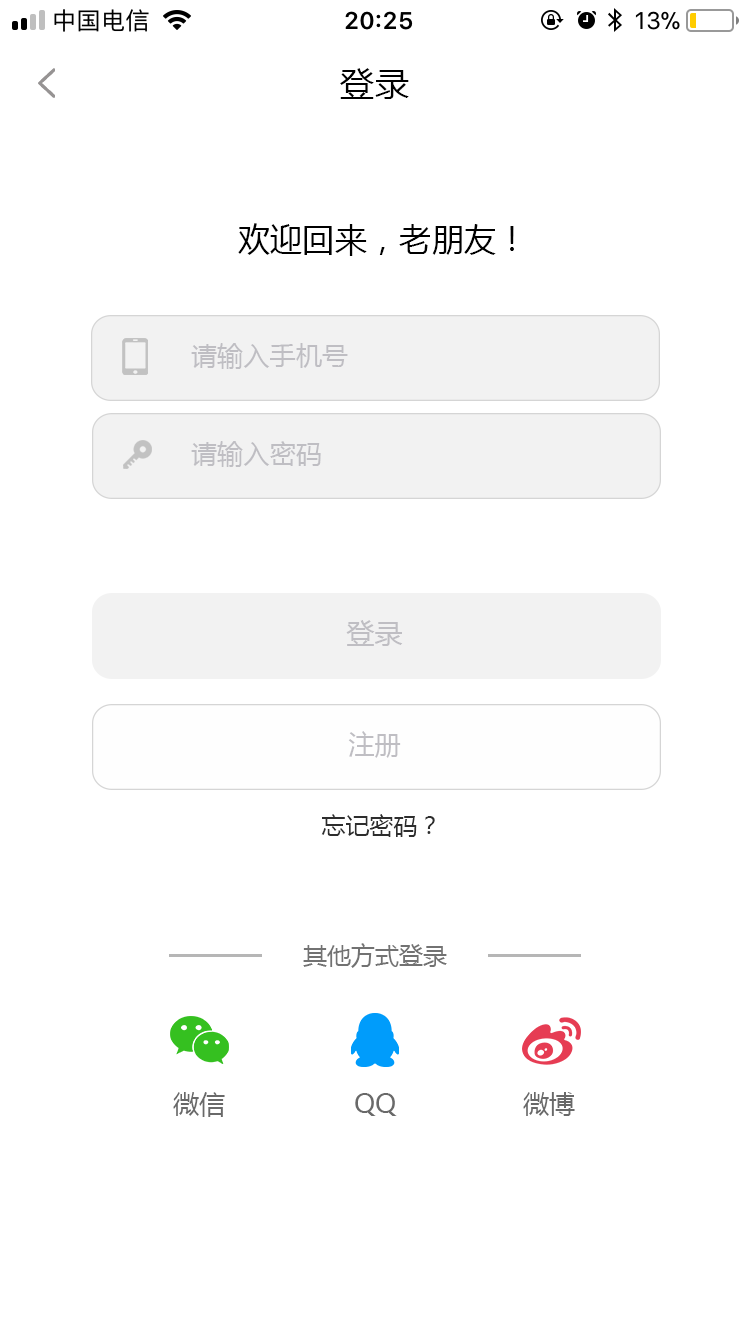
<style>
.page{position:relative;width:750px;height:1334px;background:#ffffff}
.page>*{position:absolute;margin:0}
.t1{font:34px "MicrosoftYaHei";letter-spacing:0.01em;color:#000000}
.t2{font:32px "MicrosoftYaHei";letter-spacing:0.01em;color:#000000}
.t3{font:26px "MicrosoftYaHei";letter-spacing:0.01em;color:#bfbec3}
.t4{font:28px "MicrosoftYaHei";letter-spacing:0.01em;color:#bfbec3}
.t5{font:24px "MicrosoftYaHei";color:#2d2d2d}
.t6{font:24px "MicrosoftYaHei";color:#727272}
.t7{font:26px "MicrosoftYaHei";color:#696969}
</style>
<div class="page">
<p class="t1" style="left:340px;top:68px;width:69px;height:31px">登录</p>
<p class="t2" style="left:238px;top:223px;width:276px;height:33px">欢迎回来，老朋友！</p>
<p class="t3" style="left:191px;top:343px;width:157px;height:26px">请输入手机号</p>
<p class="t3" style="left:191px;top:441px;width:130px;height:26px">请输入密码</p>
<p class="t4" style="left:346px;top:620px;width:57px;height:26px">登录</p>
<p class="t3" style="left:348px;top:731px;width:53px;height:27px">注册</p>
<p class="t5" style="left:321px;top:814px;width:114px;height:23px">忘记密码？</p>
<p class="t6" style="left:303px;top:943px;width:144px;height:25px">其他方式登录</p>
<p class="t7" style="left:173px;top:1092px;width:52px;height:25px">微信</p>
<p class="t7" style="left:355px;top:1093px;width:42px;height:23px">QQ</p>
<p class="t7" style="left:523px;top:1092px;width:52px;height:24px">微博</p>
</div>
